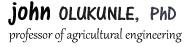
<style>
.page{position:relative;width:195px;height:47px;background:#ffffff}
.page>*{position:absolute;margin:0}
.t1{font:15.4px "Gabriola";color:#060606}
.t2{font:28.3px "ARCENA";color:#050505}
.t3{font:20px "ARCENA";color:#1e1e21}
.t4{font:20px "ARCENA";color:#3a3b4c}
</style>
<div class="page">
<p class="t1" style="left:8px;top:1px;width:174px;height:42px"><span class="t2">john </span><span class="t3">OLUKUNLE</span><span class="t4">,  PhD<br></span>professor of agricultural engineering</p>
</div>
